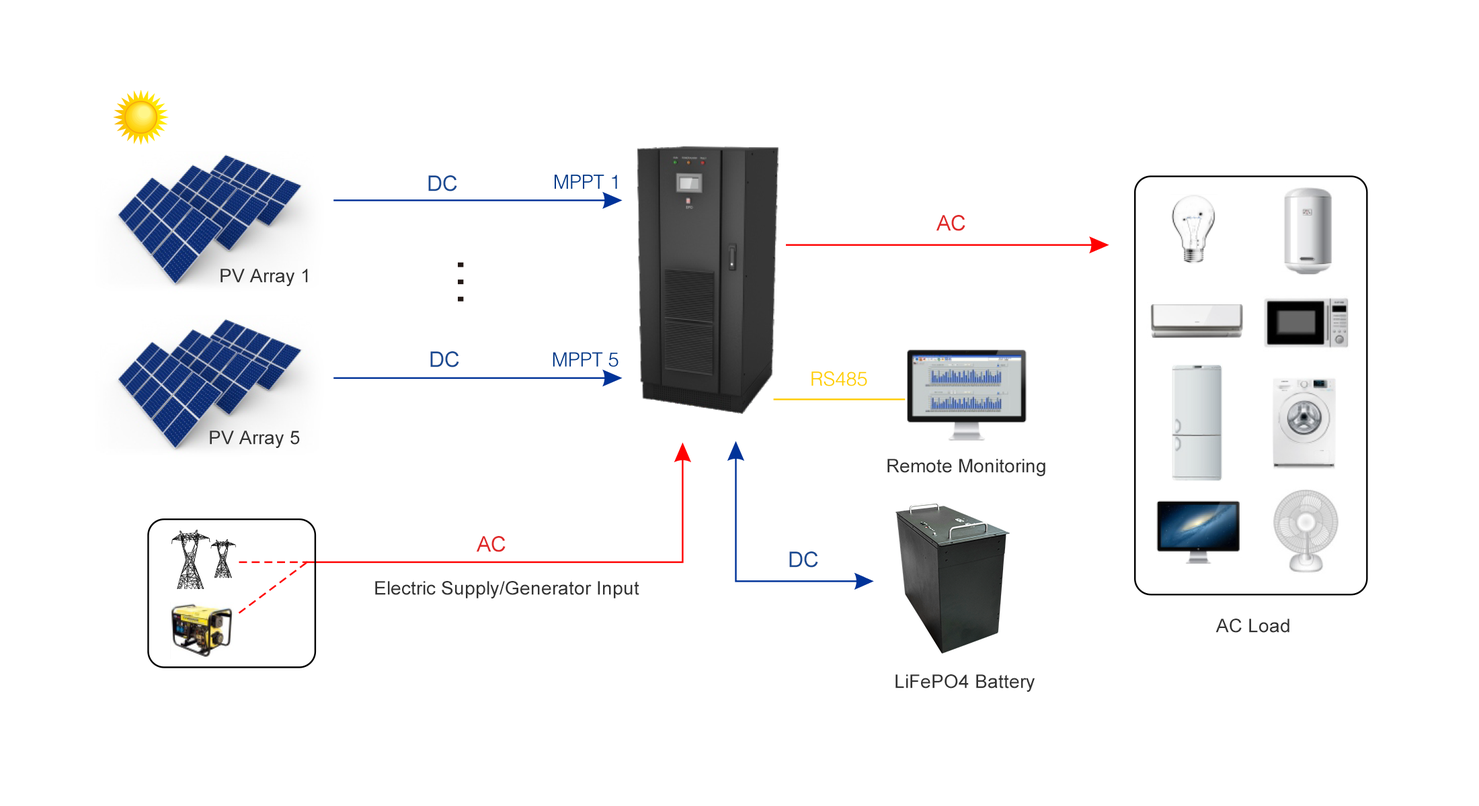
<style>
.page{position:relative;width:1479px;height:806px;background:#ffffff}
.page>*{position:absolute;margin:0}
.t1{font:21.5px "ArialMT";color:#1a4a92}
.t2{font:21.5px "ArialMT";color:#e02828}
.t3{font:18.8px "ArialMT";color:#323232}
</style>
<div class="page">
<p class="t1" style="left:428px;top:175px;width:29px;height:17px">DC</p>
<p class="t2" style="left:936px;top:215px;width:29px;height:16px">AC</p>
<p class="t3" style="left:220px;top:269px;width:88px;height:17px">PV Array 1</p>
<p class="t1" style="left:430px;top:351px;width:29px;height:17px">DC</p>
<p class="t3" style="left:210px;top:431px;width:90px;height:17px">PV Array 5</p>
<p class="t3" style="left:887px;top:459px;width:158px;height:17px">Remote Monitoring</p>
<p class="t2" style="left:476px;top:536px;width:29px;height:16px">AC</p>
<p class="t1" style="left:789px;top:552px;width:29px;height:16px">DC</p>
<p class="t3" style="left:375px;top:581px;width:264px;height:18px">Electric Supply/Generator Input</p>
<p class="t3" style="left:1215px;top:619px;width:74px;height:14px">AC Load</p>
<p class="t3" style="left:895px;top:675px;width:139px;height:17px">LiFePO4 Battery</p>
</div>
